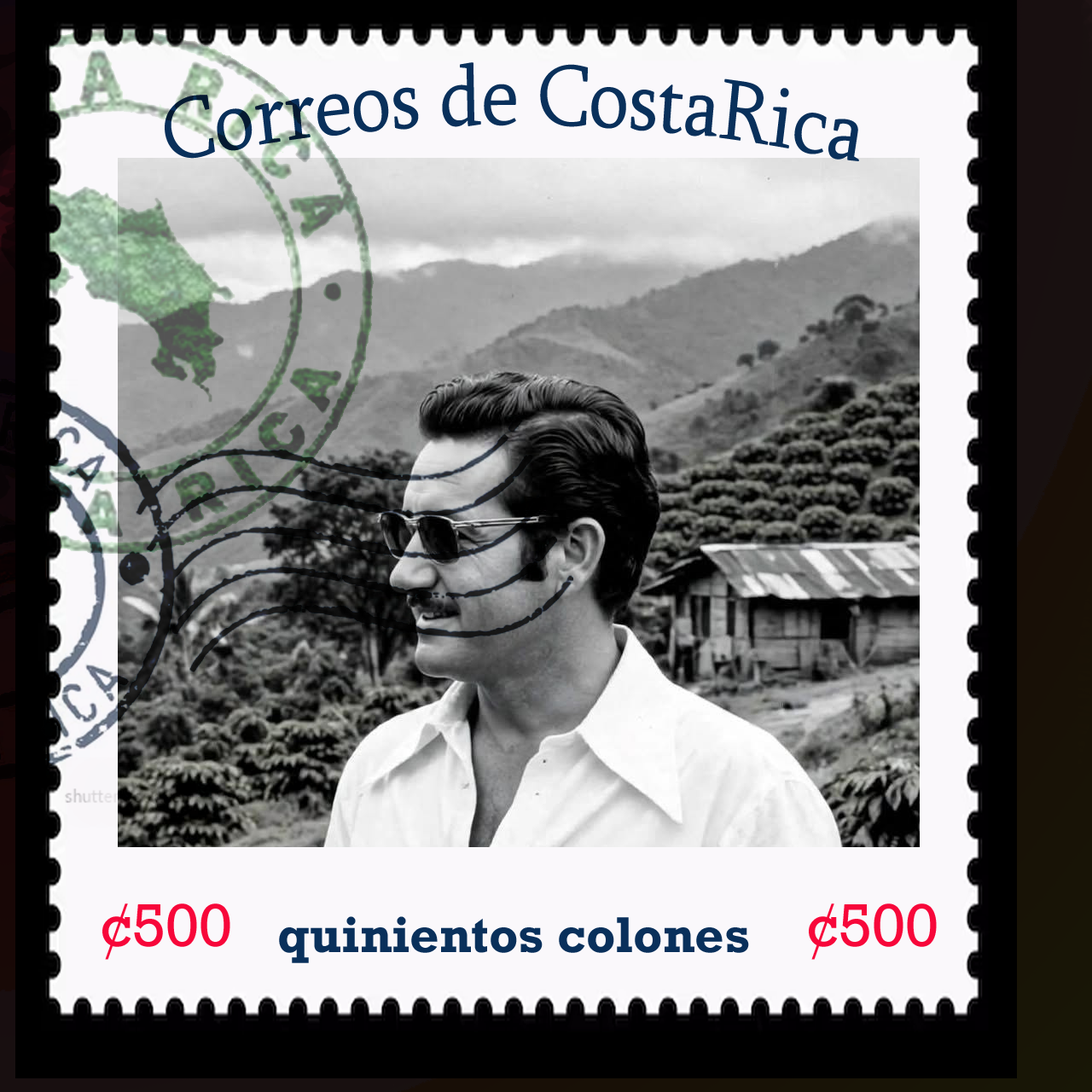
<style>
.page{position:relative;width:1092px;height:1092px}
.page>*{position:absolute;margin:0}
.t1{font:88.4px "Sylfaen";color:#09305b;scale:0.83 1}
.t2{font:61.4px "Rockwell";color:#f7073a}
.t3{font:51.2px "Rockwell-Bold";color:#09305b}
</style>
<div class="page">
<p class="t1" style="left:165px;top:62px;width:694px;height:99px">Correos de CostaRica</p>
<p class="t2" style="left:102px;top:903px;width:128px;height:57px">¢500</p>
<p class="t2" style="left:809px;top:903px;width:128px;height:57px">¢500</p>
<p class="t3" style="left:279px;top:916px;width:470px;height:47px">quinientos colones</p>
</div>
